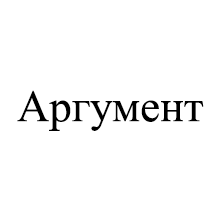
<style>
.page{position:relative;width:221px;height:221px;background:#ffffff}
.page>*{position:absolute;margin:0}
.t1{font:44.7px "TimesNewRomanPSMT";color:#000000}
</style>
<div class="page">
<p class="t1" style="left:17px;top:90px;width:187px;height:41px">Аргумент</p>
</div>
